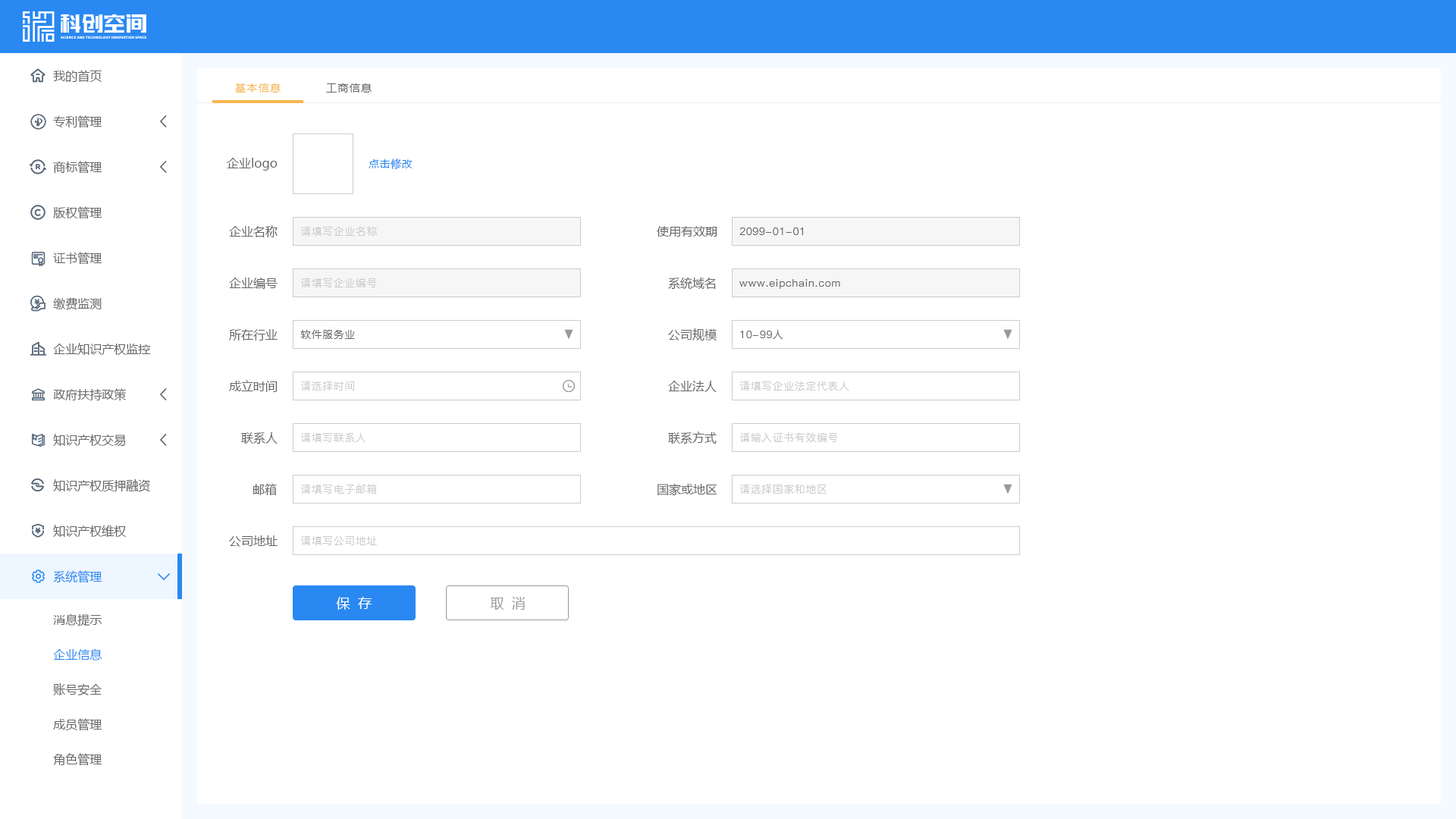
<style>
.page{position:relative;width:1456px;height:819px;background:#ffffff}
.page>*{position:absolute;margin:0}
.t1{font:12.1px "MicrosoftYaHei";color:#666666}
.t2{font:10.6px "MicrosoftYaHei";letter-spacing:0.1em;color:#f8b551}
.t3{font:10.6px "MicrosoftYaHei";letter-spacing:0.1em;color:#666666}
.t4{font:10.6px "MicrosoftYaHei";letter-spacing:0.04em;color:#2988f2}
.t5{font:10.6px "PingFang-SC-Medium";letter-spacing:0.04em;color:#cccccc}
.t6{font:10.6px "PingFang-SC-Medium";letter-spacing:0.04em;color:#666666}
.t7{font:12.1px "MicrosoftYaHei";color:#2988f2}
.t8{font:13.6px "MicrosoftYaHei";color:#ffffff}
.t9{font:13.6px "MicrosoftYaHei";color:#999999}
</style>
<div class="page">
<p class="t1" style="left:53px;top:70px;width:49px;height:13px">我的首页</p>
<p class="t2" style="left:235px;top:83px;width:46px;height:10px">基本信息</p>
<p class="t3" style="left:326px;top:83px;width:46px;height:10px">工商信息</p>
<p class="t1" style="left:53px;top:115px;width:49px;height:13px">专利管理</p>
<p class="t1" style="left:53px;top:161px;width:49px;height:13px">商标管理</p>
<p class="t1" style="left:227px;top:158px;width:51px;height:13px">企业logo</p>
<p class="t4" style="left:369px;top:158px;width:44px;height:11px">点击修改</p>
<p class="t1" style="left:53px;top:206px;width:49px;height:13px">版权管理</p>
<p class="t1" style="left:229px;top:225px;width:49px;height:12px">企业名称</p>
<p class="t5" style="left:300px;top:226px;width:77px;height:10px">请填写企业名称</p>
<p class="t1" style="left:657px;top:226px;width:60px;height:11px">使用有效期</p>
<p class="t6" style="left:739px;top:227px;width:64px;height:8px">2099-01-01</p>
<p class="t1" style="left:53px;top:252px;width:49px;height:13px">证书管理</p>
<p class="t1" style="left:229px;top:278px;width:49px;height:11px">企业编号</p>
<p class="t5" style="left:300px;top:278px;width:77px;height:9px">请填写企业编号</p>
<p class="t1" style="left:668px;top:277px;width:48px;height:13px">系统域名</p>
<p class="t6" style="left:739px;top:279px;width:101px;height:10px">www.eipchain.com</p>
<p class="t1" style="left:53px;top:297px;width:49px;height:13px">缴费监测</p>
<p class="t1" style="left:229px;top:329px;width:49px;height:11px">所在行业</p>
<p class="t6" style="left:300px;top:329px;width:55px;height:10px">软件服务业</p>
<p class="t1" style="left:668px;top:328px;width:49px;height:12px">公司规模</p>
<p class="t6" style="left:740px;top:330px;width:43px;height:9px">10-99人</p>
<p class="t1" style="left:53px;top:343px;width:98px;height:12px">企业知识产权监控</p>
<p class="t1" style="left:53px;top:388px;width:73px;height:13px">政府扶持政策</p>
<p class="t1" style="left:229px;top:380px;width:49px;height:12px">成立时间</p>
<p class="t5" style="left:300px;top:381px;width:54px;height:10px">请选择时间</p>
<p class="t1" style="left:668px;top:381px;width:49px;height:11px">企业法人</p>
<p class="t5" style="left:739px;top:381px;width:110px;height:10px">请填写企业法定代表人</p>
<p class="t1" style="left:53px;top:434px;width:73px;height:13px">知识产权交易</p>
<p class="t1" style="left:241px;top:432px;width:37px;height:12px">联系人</p>
<p class="t5" style="left:300px;top:432px;width:66px;height:10px">请填写联系人</p>
<p class="t1" style="left:668px;top:431px;width:49px;height:13px">联系方式</p>
<p class="t5" style="left:739px;top:432px;width:99px;height:10px">请输入证书有效编号</p>
<p class="t1" style="left:53px;top:479px;width:97px;height:13px">知识产权质押融资</p>
<p class="t1" style="left:253px;top:483px;width:24px;height:13px">邮箱</p>
<p class="t5" style="left:300px;top:484px;width:77px;height:10px">请填写电子邮箱</p>
<p class="t1" style="left:657px;top:483px;width:60px;height:13px">国家或地区</p>
<p class="t5" style="left:739px;top:484px;width:88px;height:10px">请选择国家和地区</p>
<p class="t1" style="left:53px;top:525px;width:74px;height:13px">知识产权维权</p>
<p class="t1" style="left:229px;top:535px;width:49px;height:12px">公司地址</p>
<p class="t5" style="left:300px;top:535px;width:77px;height:10px">请填写公司地址</p>
<p class="t7" style="left:53px;top:570px;width:49px;height:13px">系统管理</p>
<p class="t8" style="left:336px;top:597px;width:36px;height:13px">保  存</p>
<p class="t9" style="left:490px;top:597px;width:35px;height:13px">取  消</p>
<p class="t1" style="left:53px;top:613px;width:49px;height:13px">消息提示</p>
<p class="t7" style="left:53px;top:648px;width:49px;height:12px">企业信息</p>
<p class="t1" style="left:53px;top:683px;width:49px;height:12px">账号安全</p>
<p class="t1" style="left:53px;top:718px;width:49px;height:13px">成员管理</p>
<p class="t1" style="left:53px;top:753px;width:49px;height:13px">角色管理</p>
</div>
